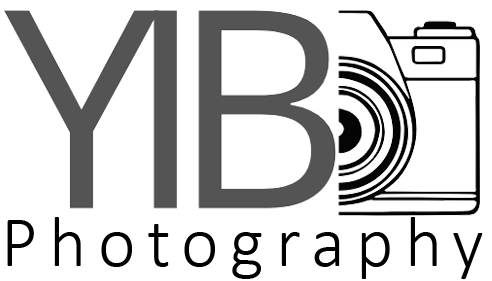
<style>
.page{position:relative;width:492px;height:281px;background:#ffffff}
.page>*{position:absolute;margin:0}
.t1{font:71.9px "Calibri-Light";letter-spacing:0.16em;color:#000000}
</style>
<div class="page">
<p class="t1" style="left:7px;top:217px;width:476px;height:62px">Photography</p>
</div>
